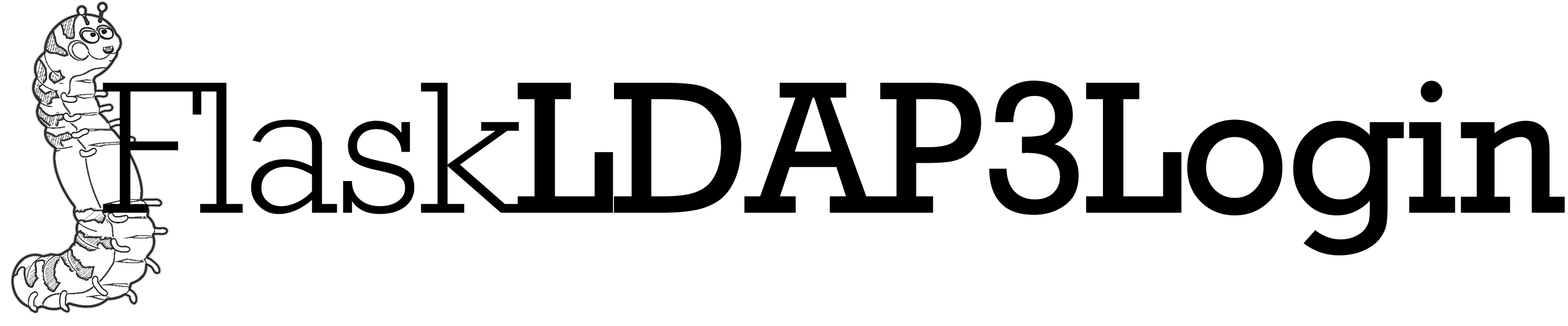
<style>
.page{position:relative;width:1568px;height:326px;background:#ffffff}
.page>*{position:absolute;margin:0}
.t1{font:191.2px "Rockwell";letter-spacing:-0.015em;color:#000000}
.t2{font:191.2px "Rockwell-Light";letter-spacing:-0.015em;color:#000000}
</style>
<div class="page">
<p class="t1" style="left:103px;top:81px;width:1462px;height:175px"><span class="t2">Flask</span>LDAP3Login</p>
</div>
